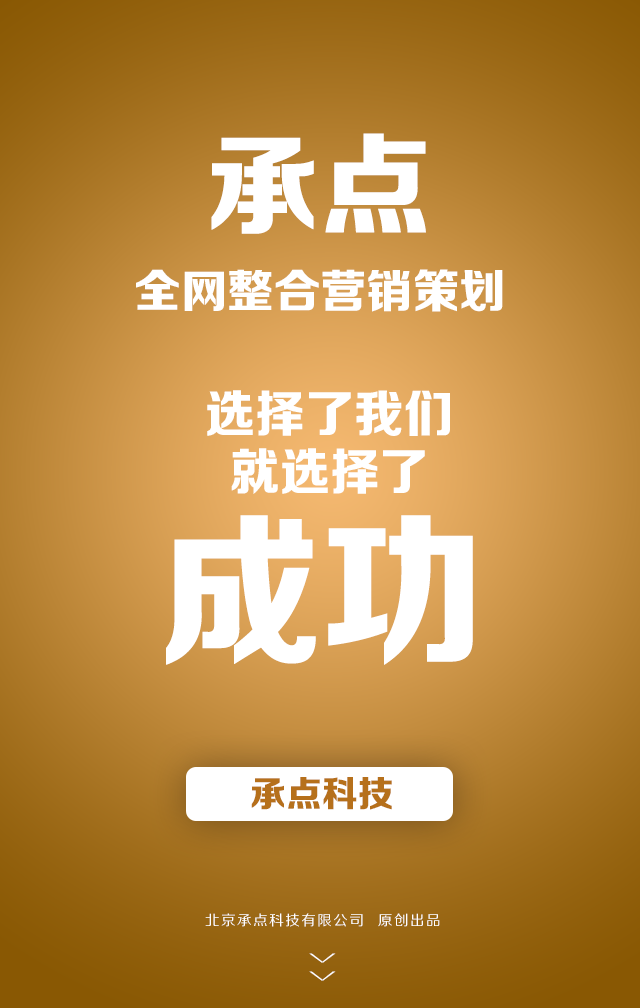
<style>
.page{position:relative;width:640px;height:1008px}
.page>*{position:absolute;margin:0}
.t1{font:112.1px "FZZDHJW--GB1-0";color:#ffffff;text-transform:uppercase}
.t2{font:46px "FZZDHJW--GB1-0";color:#ffffff;text-transform:uppercase}
.t3{font:50.2px/57.9px "FZZDHJW--GB1-0";color:#ffffff;text-transform:uppercase}
.t4{font:164px "FZZDHJW--GB1-0";color:#ffffff;text-transform:uppercase}
.t5{font:36px "FZZDHJW--GB1-0";letter-spacing:0.005em;color:#b6701b;text-transform:uppercase}
.t6{font:14.2px "FZZHJW--GB1-0";letter-spacing:0.1em;color:#ffffff;text-transform:uppercase}
.t7{font:36.8px "FZZXHJW--GB1-0";letter-spacing:0.5em;color:#ffffff;text-transform:uppercase;scale:0.44 1}
</style>
<div class="page">
<p class="t1" style="left:211px;top:133px;width:215px;height:101px">承点</p>
<p class="t2" style="left:136px;top:269px;width:367px;height:43px">全网整合营销策划</p>
<p class="t3" style="left:207px;top:390px;width:243px;height:104px;text-align:center">选择了我们<br>就选择了</p>
<p class="t4" style="left:166px;top:515px;width:307px;height:150px">成功</p>
<p class="t5" style="left:251px;top:777px;width:141px;height:33px">承点科技</p>
<p class="t6" style="left:205px;top:913px;width:235px;height:14px">北京承点科技有限公司  原创出品</p>
<p class="t7" style="left:309px;top:953px;width:27px;height:28px;rotate:90deg">&gt;&gt;</p>
</div>
